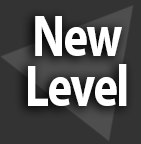
<style>
.page{position:relative;width:141px;height:144px;background:#333333}
.page>*{position:absolute;margin:0}
.t1{font:57.6px "MyriadPro-Bold";letter-spacing:-0.04em;color:#ffffff;scale:0.83 1}
</style>
<div class="page">
<p class="t1" style="left:28px;top:16px;width:99px;height:90px;text-align:center">New<br>Level</p>
</div>
